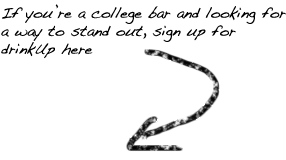
<style>
.page{position:relative;width:286px;height:160px;background:#ffffff}
.page>*{position:absolute;margin:0}
.t1{font:15px "Handwriting-Dakota";color:#000000}
</style>
<div class="page">
<p class="t1" style="left:1px;top:4px;width:285px;height:55px">If you’re a college bar and looking for a way to stand out, sign up for   <br>drinkUp here</p>
</div>
